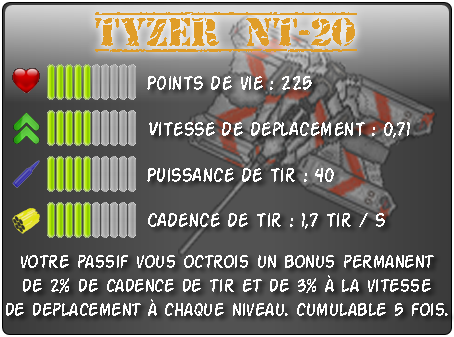
<style>
.page{position:relative;width:454px;height:337px}
.page>*{position:absolute;margin:0}
.t1{font:40px "OldStamper";letter-spacing:-0.025em;color:#e09d28}
.t2{font:21.3px "ActionMan";letter-spacing:-0.025em;color:#ffffff}
.t3{font:20px "ActionMan";letter-spacing:-0.025em;color:#ffffff}
</style>
<div class="page">
<p class="t1" style="left:95px;top:12px;width:262px;height:40px">Tyzer nt-20</p>
<p class="t2" style="left:147px;top:76px;width:165px;height:14px">Points de vie : 225</p>
<p class="t2" style="left:149px;top:122px;width:261px;height:16px">Vitesse de deplacement : 0,71</p>
<p class="t2" style="left:147px;top:168px;width:187px;height:14px">Puissance de tir : 40</p>
<p class="t2" style="left:148px;top:213px;width:237px;height:16px">Cadence de tir : 1,7 tir / s</p>
<p class="t3" style="left:6px;top:255px;width:442px;height:61px;text-align:center">votre passif vous octrois un bonus permanent<br>de 2% de cadence de tir et de 3% à la vitesse<br>de deplacement à chaque niveau. cumulable 5 fois.</p>
</div>
